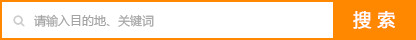
<style>
.page{position:relative;width:416px;height:40px;background:#ffffff}
.page>*{position:absolute;margin:0}
.t1{font:12px "MicrosoftYaHei";color:#a4a4a4}
.t2{font:18px "MicrosoftYaHei";letter-spacing:0.3em;color:#ffffff;font-weight:bold}
</style>
<div class="page">
<p class="t1" style="left:34px;top:14px;width:120px;height:13px">请输入目的地、关键词</p>
<p class="t2" style="left:353px;top:11px;width:42px;height:18px">搜索</p>
</div>
